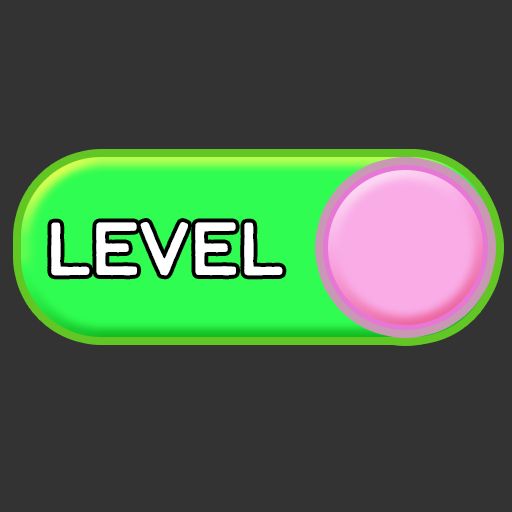
<style>
.page{position:relative;width:512px;height:512px;background:#333333}
.page>*{position:absolute;margin:0}
.t1{font:74.4px "Calder-Dark";letter-spacing:-0.06em;color:#ffffff}
</style>
<div class="page">
<p class="t1" style="left:51px;top:222px;width:232px;height:54px">LEVEL</p>
</div>
